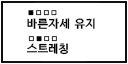
<style>
.page{position:relative;width:128px;height:64px;background:#ffffff}
.page>*{position:absolute;margin:0}
.t1{font:7.7px "KoreanNGD-E";color:#000000}
.t2{font:11px "KoreanNGD-E";color:#000000}
</style>
<div class="page">
<p class="t1" style="left:28px;top:10px;width:29px;height:6px">■□□□</p>
<p class="t2" style="left:27px;top:18px;width:68px;height:11px">바른자세 유지</p>
<p class="t1" style="left:28px;top:36px;width:29px;height:6px">□■□□</p>
<p class="t2" style="left:26px;top:43px;width:42px;height:12px">스트레칭</p>
</div>
